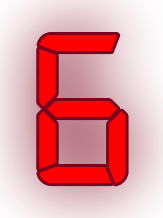
<style>
.page{position:relative;width:163px;height:218px}
.page>*{position:absolute;margin:0}
.t1{font:225.9px "Digital-7";color:#ff0000}
</style>
<div class="page">
<p class="t1" style="left:39px;top:35px;width:87px;height:149px">6</p>
</div>
